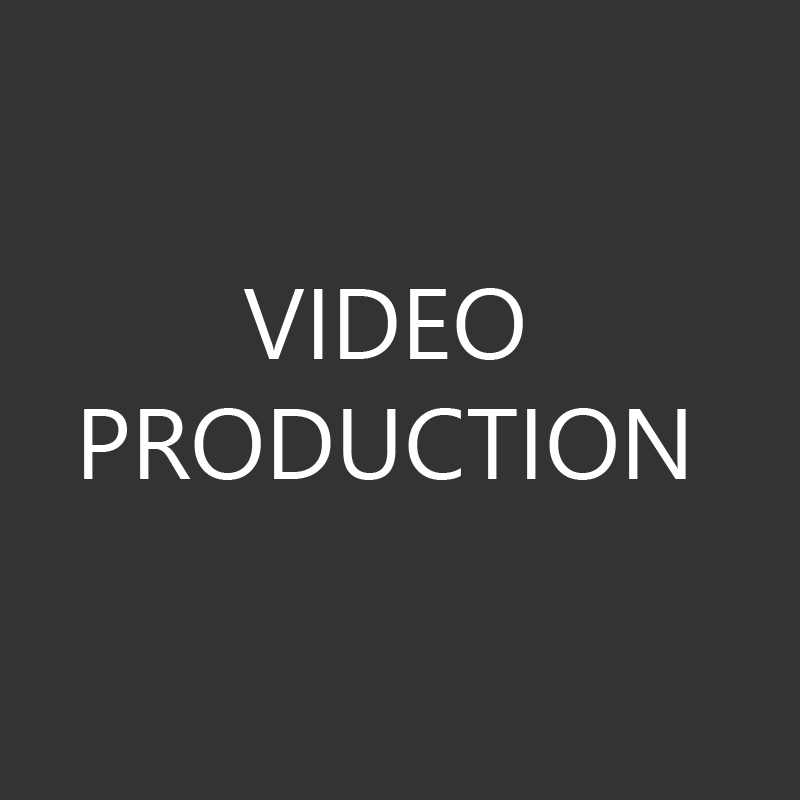
<style>
.page{position:relative;width:800px;height:800px;background:#333333}
.page>*{position:absolute;margin:0}
.t1{font:100px "SegoeUIHistoric";color:#ffffff}
</style>
<div class="page">
<p class="t1" style="left:84px;top:288px;width:602px;height:192px;text-align:center">VIDEO<br>PRODUCTION</p>
</div>
